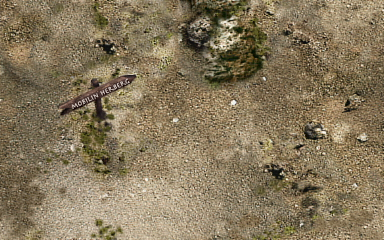
<style>
.page{position:relative;width:384px;height:240px}
.page>*{position:absolute;margin:0}
.t1{font:7.3px "HerculanumLTW01-Bold";letter-spacing:0.02em;color:#cdc0ba}
</style>
<div class="page">
<p class="t1" style="left:71px;top:78px;width:59px;height:31px;rotate:-25deg">mobilin herberg</p>
</div>
